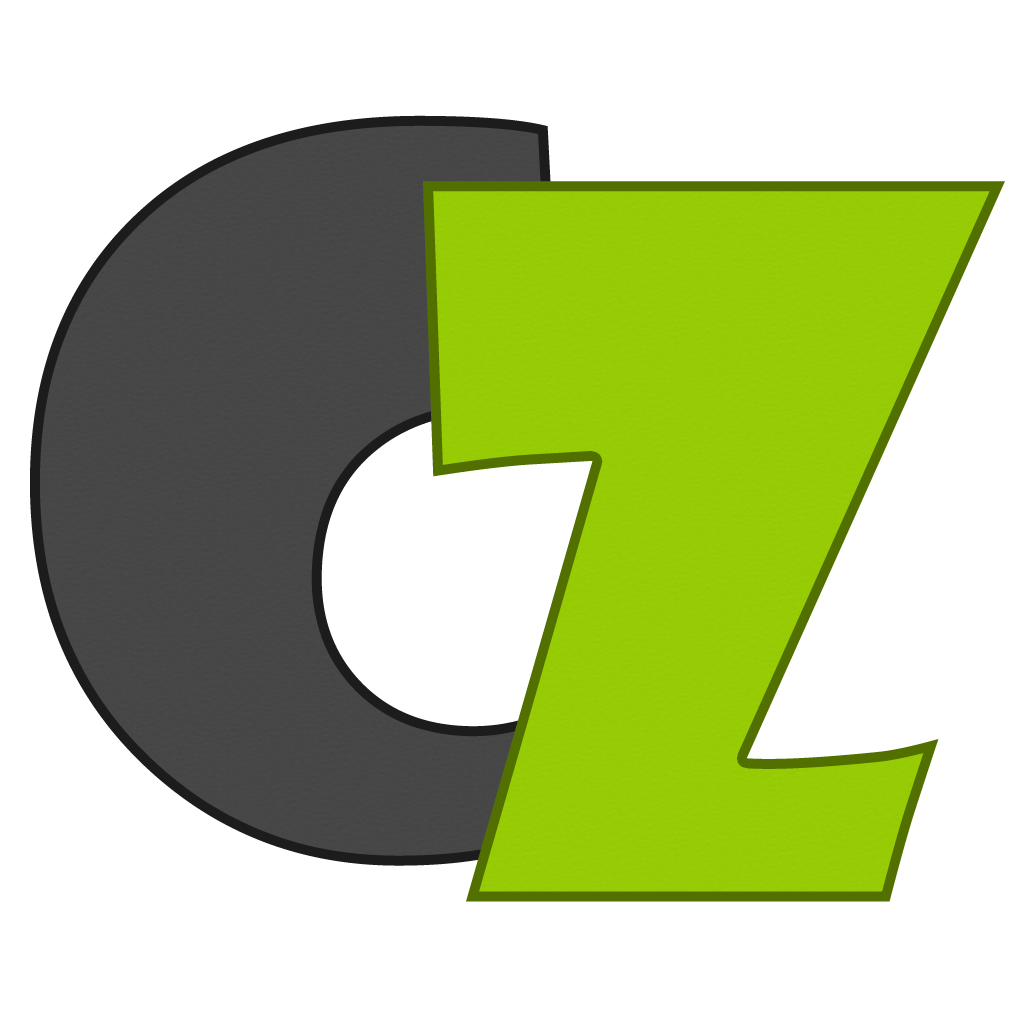
<style>
.page{position:relative;width:1024px;height:1024px;background:#ffffff}
.page>*{position:absolute;margin:0}
.t1{font:960px "ShowcardGothic-Reg";color:#444444}
.t2{font:960px "ShowcardGothic-Reg";color:#96cd00}
</style>
<div class="page">
<p class="t1" style="left:30px;top:115px;width:533px;height:751px">C</p>
<p class="t2" style="left:423px;top:181px;width:582px;height:721px">Z</p>
</div>
